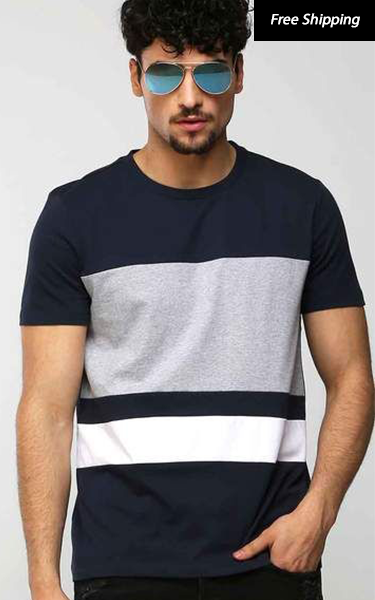
<style>
.page{position:relative;width:375px;height:600px}
.page>*{position:absolute;margin:0}
.t1{font:14.9px "MyriadPro-Regular";color:#ffffff;font-weight:bold;font-style:italic}
</style>
<div class="page">
<p class="t1" style="left:271px;top:13px;width:89px;height:15px">Free Shipping</p>
</div>
